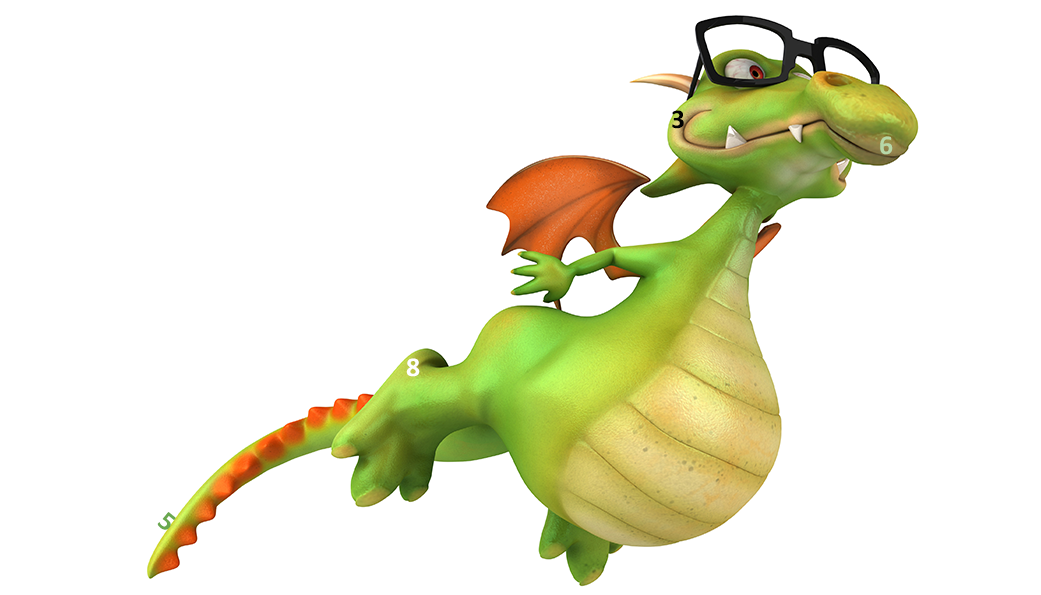
<style>
.page{position:relative;width:1041px;height:595px;background:#ffffff}
.page>*{position:absolute;margin:0}
.t1{font:27.2px "Calibri-Bold";letter-spacing:0.1em;color:#000000}
.t2{font:27.2px "Calibri-Bold";letter-spacing:0.1em;color:#b6d7a8}
.t3{font:27.2px "Calibri-Bold";letter-spacing:0.1em;color:#feffff}
.t4{font:27.2px "Calibri-Bold";letter-spacing:0.1em;color:#6aa84f}
</style>
<div class="page">
<p class="t1" style="left:672px;top:110px;width:12px;height:19px">3</p>
<p class="t2" style="left:880px;top:136px;width:13px;height:19px">6</p>
<p class="t3" style="left:406px;top:358px;width:14px;height:19px">8</p>
<p class="t4" style="left:157px;top:512px;width:19px;height:18px;rotate:39deg">5</p>
</div>
